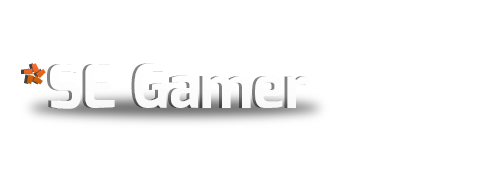
<style>
.page{position:relative;width:500px;height:175px;background:#ffffff}
.page>*{position:absolute;margin:0}
.t1{font:60px "Exo-Black";letter-spacing:0.005em}
.t2{font:60px "Exo-Bold";letter-spacing:0.005em;color:#fcfcfc}
.t3{font:60px "Exo-Black";letter-spacing:0.005em;color:#fcfcfc}
</style>
<div class="page">
<p class="t1" style="left:24px;top:63px;width:22px;height:22px">*</p>
<p class="t2" style="left:50px;top:63px;width:259px;height:46px"><span class="t3">  </span>SE Gamer</p>
</div>
